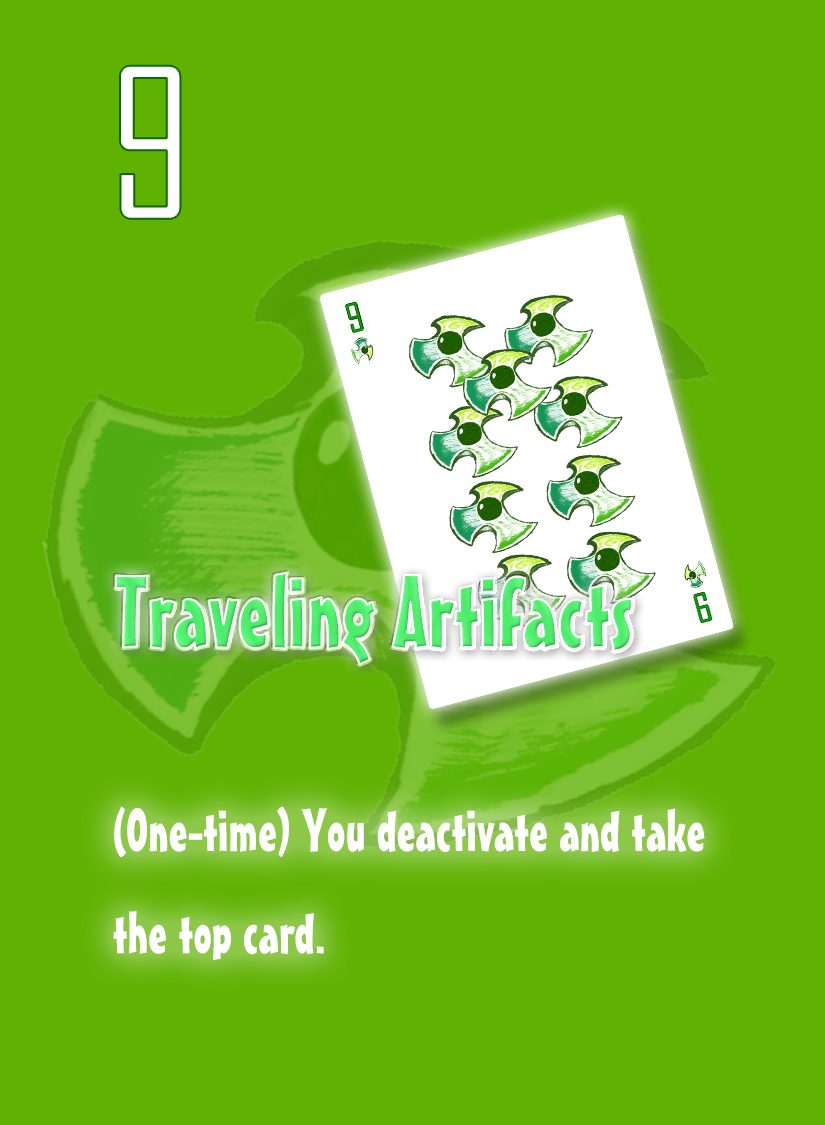
<style>
.page{position:relative;width:825px;height:1125px;background:#5fb102}
.page>*{position:absolute;margin:0}
.t1{font:200px "AgencyFB-Reg";color:#ffffff}
.t2{font:100px "MisterEarlBT-Regular";color:#52ed6f}
.t3{font:58.3px "MisterEarlBT-Regular";color:#ffffff}
</style>
<div class="page">
<p class="t1" style="left:120px;top:65px;width:61px;height:154px">9</p>
<p class="t2" style="left:115px;top:572px;width:517px;height:92px">Traveling Artifacts</p>
<p class="t3" style="left:113px;top:806px;width:592px;height:155px">(One-time) You deactivate and take <br>the top card.</p>
</div>
